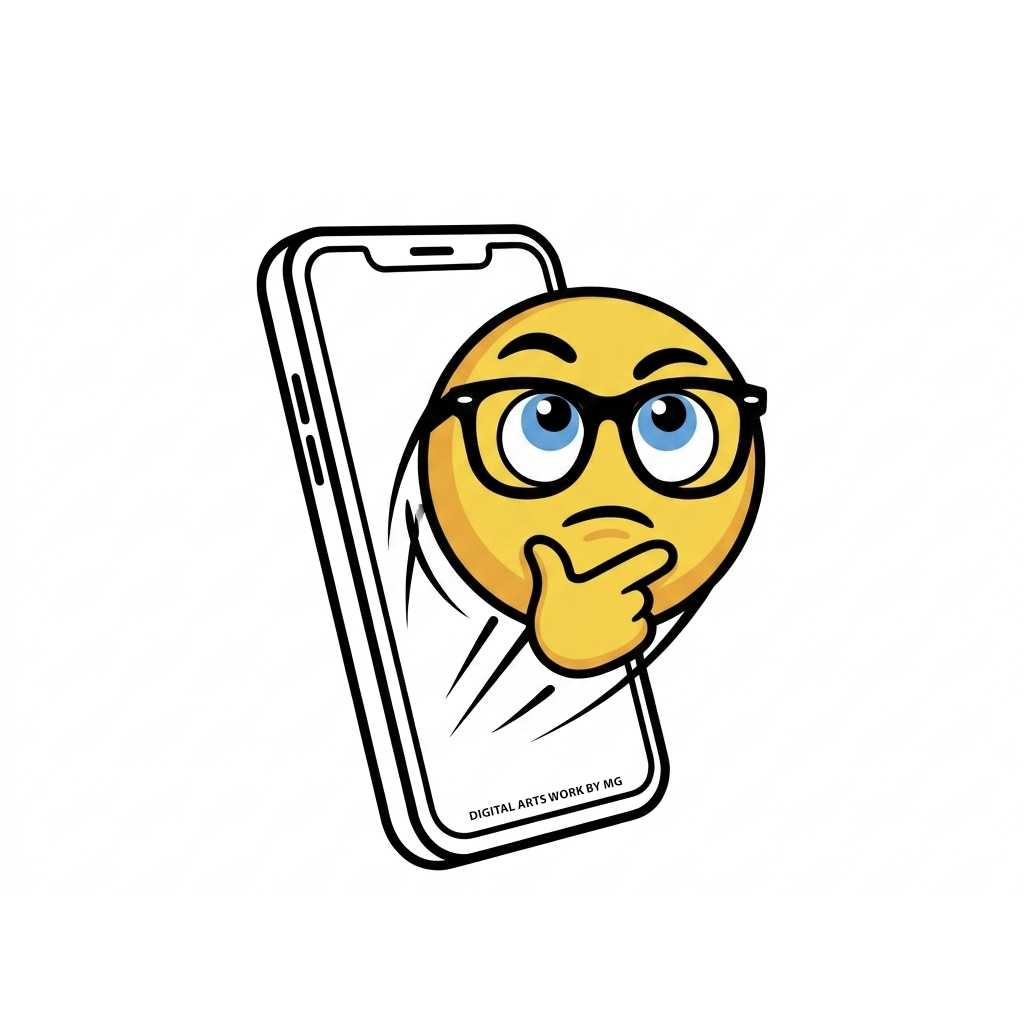
<style>
.page{position:relative;width:1024px;height:1024px;background:#ffffff}
.page>*{position:absolute;margin:0}
.t1{font:12.5px "MyriadPro-Bold";color:#020202;text-transform:uppercase}
</style>
<div class="page">
<p class="t1" style="left:469px;top:776px;width:154px;height:45px;rotate:-13deg">Digital arts work by MG</p>
</div>
